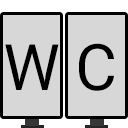
<style>
.page{position:relative;width:128px;height:128px;background:#d7d7d7}
.page>*{position:absolute;margin:0}
.t1{font:64px "Roboto-Regular";color:#000000}
</style>
<div class="page">
<p class="t1" style="left:5px;top:44px;width:54px;height:46px">W</p>
<p class="t1" style="left:79px;top:43px;width:35px;height:48px">C</p>
</div>
